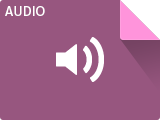
<style>
.page{position:relative;width:160px;height:120px;background:#97567f}
.page>*{position:absolute;margin:0}
.t1{font:14px "FiraSans-Regular";color:#ffffff}
</style>
<div class="page">
<p class="t1" style="left:5px;top:6px;width:40px;height:10px">AUDIO</p>
</div>
